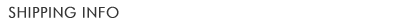
<style>
.page{position:relative;width:400px;height:24px;background:#ffffff}
.page>*{position:absolute;margin:0}
.t1{font:14.7px "FuturaBT-Light";letter-spacing:0.025em;color:#363636;text-transform:uppercase;font-weight:bold}
</style>
<div class="page">
<p class="t1" style="left:8px;top:6px;width:111px;height:12px">SHIPPING INFO</p>
</div>
